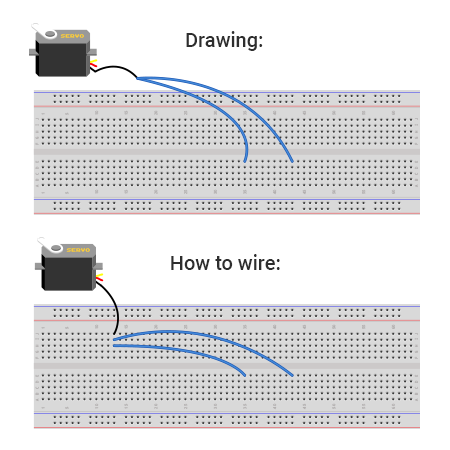
<style>
.page{position:relative;width:450px;height:450px;background:#ffffff}
.page>*{position:absolute;margin:0}
.t1{font:20px "Roboto-Medium";color:#2e2e2e}
</style>
<div class="page">
<p class="t1" style="left:186px;top:31px;width:77px;height:20px">Drawing:</p>
<p class="t1" style="left:171px;top:254px;width:109px;height:16px">How to wire:</p>
</div>
